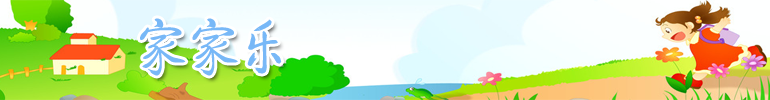
<style>
.page{position:relative;width:770px;height:100px}
.page>*{position:absolute;margin:0}
.t1{font:60px "JQiTi";color:#78b8f7}
</style>
<div class="page">
<p class="t1" style="left:140px;top:18px;width:142px;height:58px">家家乐</p>
</div>
